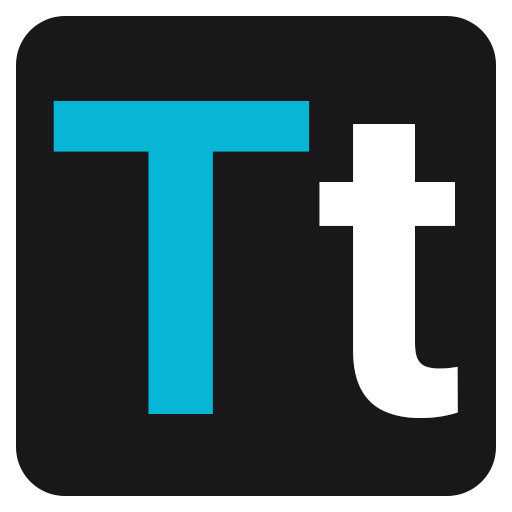
<style>
.page{position:relative;width:512px;height:512px;background:#18181b}
.page>*{position:absolute;margin:0}
.t1{font:439.7px "Roboto-Bold";color:#06b6d4}
.t2{font:439.7px "Roboto-Bold";color:#ffffff}
</style>
<div class="page">
<p class="t1" style="left:53px;top:101px;width:405px;height:317px">T<span class="t2">t</span></p>
</div>
